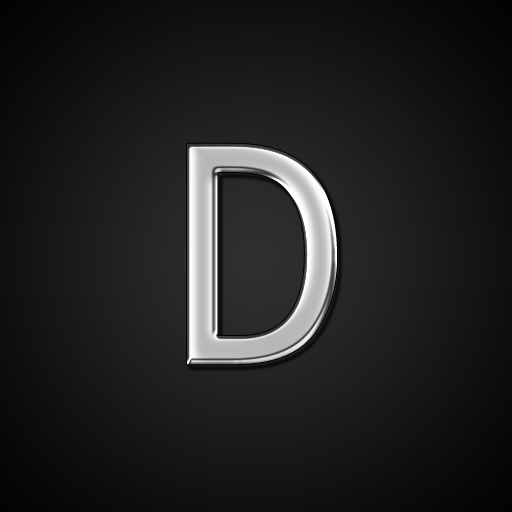
<style>
.page{position:relative;width:512px;height:512px}
.page>*{position:absolute;margin:0}
.t1{font:300px "BellGothicStd-Bold"}
</style>
<div class="page">
<p class="t1" style="left:187px;top:143px;width:150px;height:222px">D</p>
</div>
